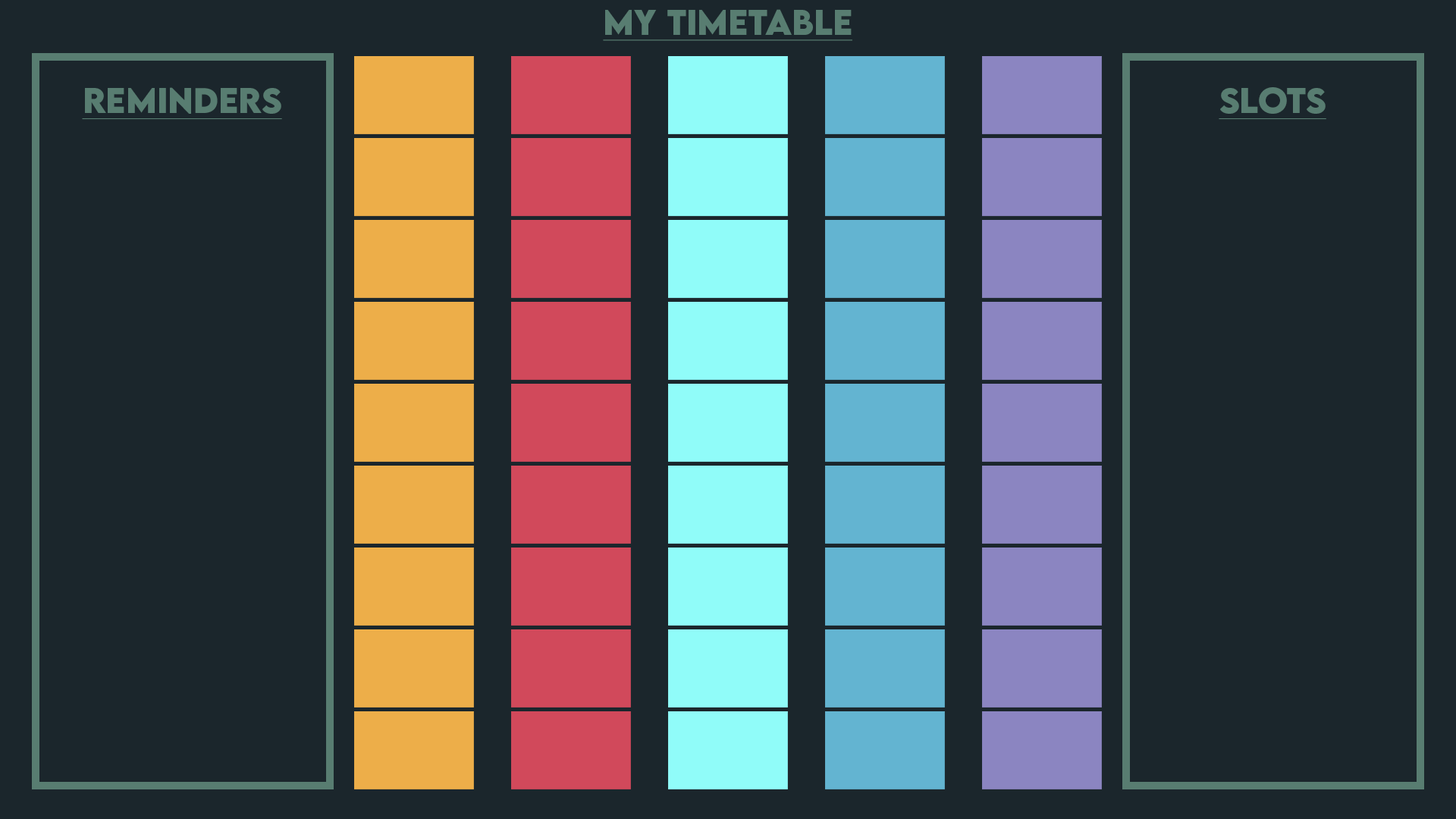
<style>
.page{position:relative;width:1456px;height:819px;background:#1b262c}
.page>*{position:absolute;margin:0}
.t1{font:31.6px "LEMONMILK-Bold";color:#587d71;text-decoration:underline}
</style>
<div class="page">
<p class="t1" style="left:603px;top:9px;width:249px;height:32px">MY TIMETABLE</p>
<p class="t1" style="left:82px;top:87px;width:200px;height:33px">Reminders</p>
<p class="t1" style="left:1219px;top:87px;width:107px;height:33px">SLOTS</p>
</div>
